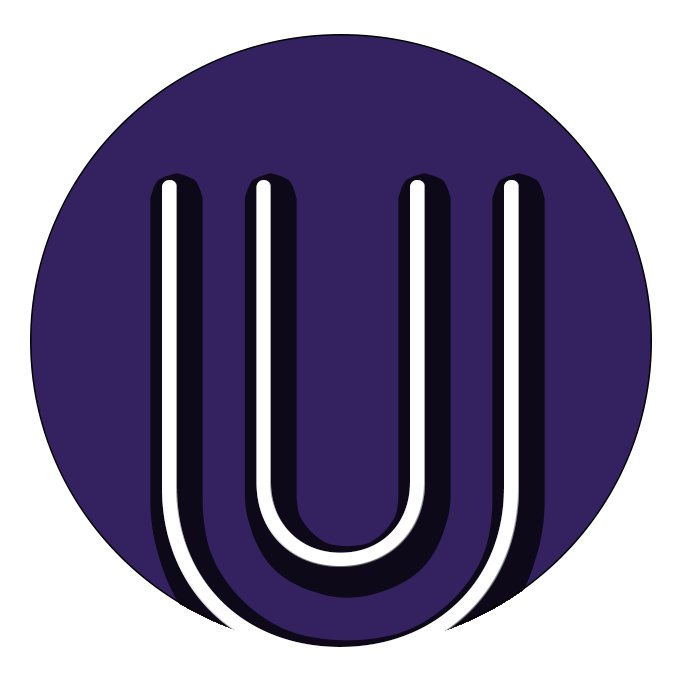
<style>
.page{position:relative;width:700px;height:700px;background:#ffffff}
.page>*{position:absolute;margin:0}
.t1{font:651px "LoveloLineLight";color:#ffffff}
</style>
<div class="page">
<p class="t1" style="left:162px;top:180px;width:357px;height:482px">U</p>
</div>
